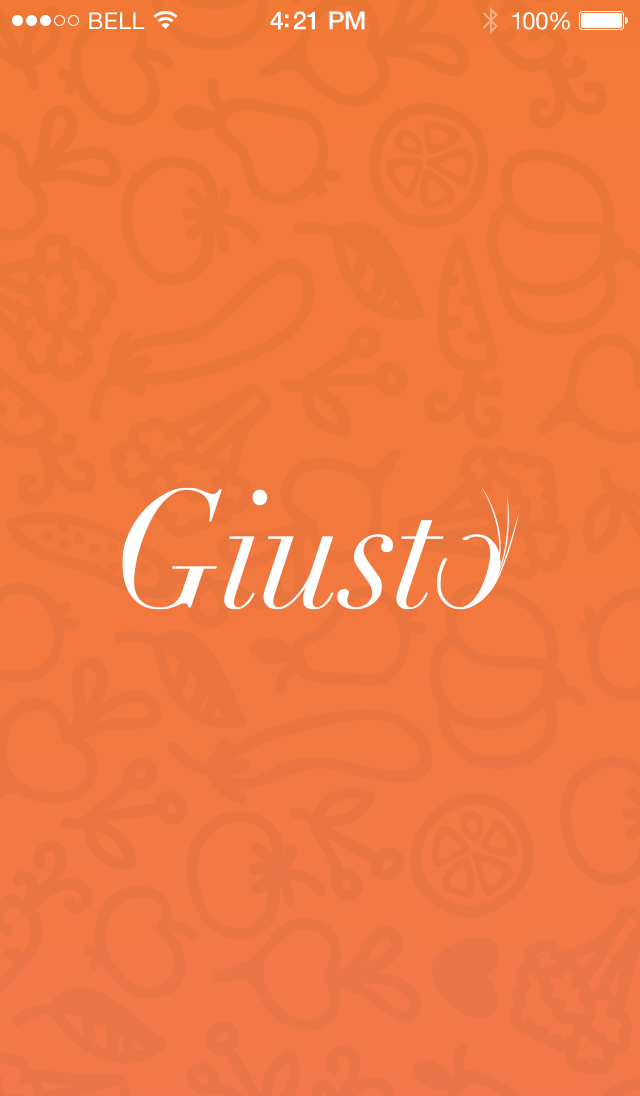
<style>
.page{position:relative;width:640px;height:1096px}
.page>*{position:absolute;margin:0}
.t1{font:23px "HelveticaNeue";letter-spacing:0.02em;color:#ffffff}
.t2{font:25px "HelveticaNeue-Medium";letter-spacing:-0.02em;color:#ffffff}
.t3{font:24px "HelveticaNeue";letter-spacing:-0.02em;color:#ffffff}
</style>
<div class="page">
<p class="t1" style="left:89px;top:12px;width:56px;height:17px">BELL</p>
<p class="t2" style="left:270px;top:11px;width:95px;height:19px">4:21 PM</p>
<p class="t3" style="left:512px;top:12px;width:58px;height:18px">100%</p>
</div>
